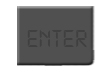
<style>
.page{position:relative;width:110px;height:72px;background:#505050}
.page>*{position:absolute;margin:0}
.t1{font:26px "DS-Digital";letter-spacing:-0.025em;color:#404040}
</style>
<div class="page">
<p class="t1" style="left:27px;top:30px;width:60px;height:18px">enter</p>
</div>
